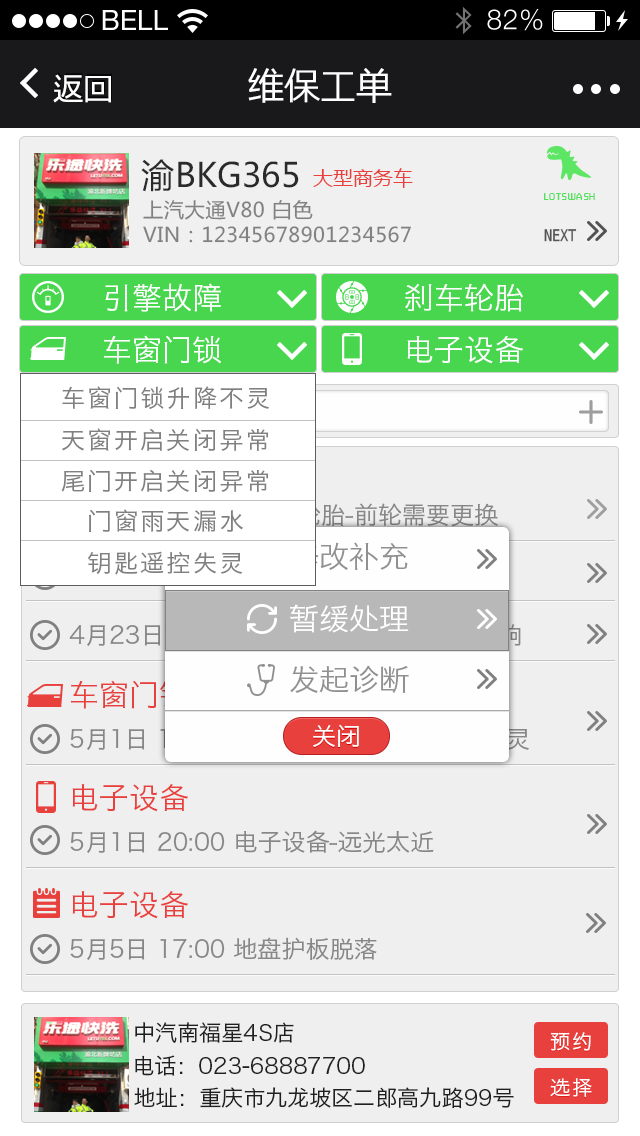
<style>
.page{position:relative;width:640px;height:1136px;background:#efefef}
.page>*{position:absolute;margin:0}
.t1{font:28px "HelveticaNeue";color:#ffffff;text-transform:uppercase}
.t2{font:28px "HelveticaNeue-Light";letter-spacing:0.025em;color:#ffffff}
.t3{font:30px "MingLan_Mono";letter-spacing:0.005em;color:#ffffff}
.t4{font:36px "MingLan_Mono";color:#fefefe}
.t5{font:33.2px "MicrosoftYaHei";letter-spacing:0.005em;color:#2a2a2a}
.t6{font:20px "MicrosoftYaHei";color:#e8413d}
.t7{font:10px "MFShangHei_Noncommercial-Regular";letter-spacing:0.1em;color:#54e05c}
.t8{font:20.3px/25px "MicrosoftYaHei";letter-spacing:0.025em;color:#818181}
.t9{font:16px "MingLan_Mono";color:#525252;text-transform:uppercase}
.t10{font:30px "HiraginoSansGB-W3";color:#ffffff}
.t11{font:24px "HiraginoSansGB-W3";letter-spacing:0.1em;color:#808080}
.t12{font:24px "HiraginoSansGB-W3"}
.t13{font:30px "HiraginoSansGB-W3";color:#909090}
.t14{font:24px "HiraginoSansGB-W3";color:#b8b8b8}
.t15{font:30px "HiraginoSansGB-W3";color:#e8413d}
.t16{font:24px "HiraginoSansGB-W3";color:#ffffff}
.t17{font:24px "HiraginoSansGB-W3";color:#878787}
.t18{font:22px "HiraginoSansGB-W3";color:#1f1f1f}
.t19{font:20px "HiraginoSansGB-W3";letter-spacing:0.1em;color:#ffffff}
</style>
<div class="page">
<p class="t1" style="left:102px;top:10px;width:66px;height:20px">Bell</p>
<p class="t2" style="left:487px;top:9px;width:56px;height:22px">82%</p>
<p class="t3" style="left:53px;top:74px;width:58px;height:29px">返回</p>
<p class="t4" style="left:248px;top:68px;width:144px;height:35px">维保工单</p>
<p class="t5" style="left:141px;top:159px;width:158px;height:33px">渝BKG365</p>
<p class="t6" style="left:313px;top:168px;width:100px;height:20px">大型商务车</p>
<p class="t7" style="left:544px;top:193px;width:51px;height:7px">LOTSWASH</p>
<p class="t8" style="left:143px;top:200px;width:268px;height:43px">上汽大通V80 白色<br>VIN：12345678901234567</p>
<p class="t9" style="left:544px;top:229px;width:33px;height:13px">NExt</p>
<p class="t10" style="left:105px;top:283px;width:116px;height:29px">引擎故障</p>
<p class="t10" style="left:405px;top:283px;width:118px;height:29px">刹车轮胎</p>
<p class="t10" style="left:104px;top:335px;width:117px;height:29px">车窗门锁</p>
<p class="t10" style="left:407px;top:336px;width:116px;height:28px">电子设备</p>
<p class="t11" style="left:62px;top:386px;width:207px;height:23px">车窗门锁升降不灵</p>
<p class="t11" style="left:62px;top:428px;width:207px;height:23px">天窗开启关闭异常</p>
<p class="t11" style="left:61px;top:469px;width:208px;height:23px">尾门开启关闭异常</p>
<p class="t12" style="left:69px;top:503px;width:429px;height:24px">4月23日 13:00 刹车轮胎-前轮需要更换</p>
<p class="t11" style="left:89px;top:509px;width:154px;height:23px">门窗雨天漏水</p>
<p class="t13" style="left:289px;top:542px;width:119px;height:29px">修改补充</p>
<p class="t11" style="left:88px;top:551px;width:154px;height:24px">钥匙遥控失灵</p>
<p class="t10" style="left:290px;top:604px;width:119px;height:29px">暂缓处理</p>
<p class="t14" style="left:69px;top:623px;width:452px;height:23px">4月23日 13:00 刹车轮胎-刹车制动时异响</p>
<p class="t13" style="left:290px;top:665px;width:119px;height:28px">发起诊断</p>
<p class="t15" style="left:71px;top:680px;width:117px;height:29px">车窗门锁</p>
<p class="t16" style="left:313px;top:724px;width:46px;height:23px">关闭</p>
<p class="t15" style="left:72px;top:784px;width:116px;height:28px">电子设备</p>
<p class="t17" style="left:70px;top:830px;width:364px;height:23px">5月1日 20:00 电子设备-远光太近</p>
<p class="t15" style="left:72px;top:891px;width:116px;height:28px">电子设备</p>
<p class="t17" style="left:70px;top:937px;width:307px;height:23px">5月5日 17:00 地盘护板脱落</p>
<p class="t18" style="left:135px;top:1022px;width:159px;height:21px">中汽南福星4S店</p>
<p class="t19" style="left:550px;top:1032px;width:41px;height:19px">预约</p>
<p class="t18" style="left:135px;top:1055px;width:230px;height:21px">电话：023-68887700</p>
<p class="t19" style="left:550px;top:1078px;width:42px;height:19px">选择</p>
<p class="t18" style="left:134px;top:1087px;width:380px;height:22px">地址：重庆市九龙坡区二郎高九路99号</p>
</div>
